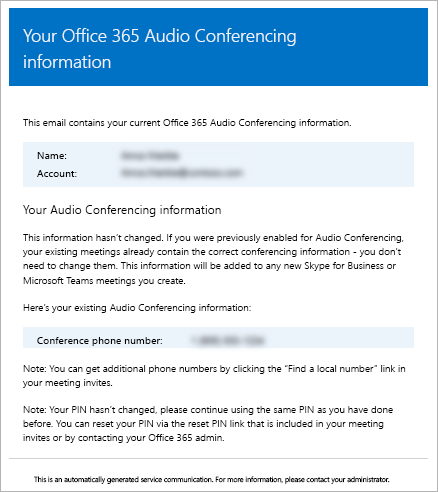
<style>
.page{position:relative;width:438px;height:492px;background:#ffffff}
.page>*{position:absolute;margin:0}
.t1{font:17.7px/26.1px "SegoeUI-Semilight";color:#ebf3fb}
.t2{font:10.1px "SegoeUI-Semilight";color:#000000}
.t3{font:10.4px "SegoeUI";color:#000000}
.t4{font:12.4px "SegoeUI-Semilight";color:#000000}
.t5{font:10.1px/14.3px "SegoeUI-Semilight";color:#000000}
.t6{font:10.1px/14px "SegoeUI-Semilight";color:#000000}
.t7{font:7.2px "SegoeUI-Semilight";color:#000000}
</style>
<div class="page">
<p class="t1" style="left:23px;top:28px;width:273px;height:40px">Your Office 365 Audio Conferencing<br>information</p>
<p class="t2" style="left:23px;top:119px;width:328px;height:9px">This email contains your current Office 365 Audio Conferencing information.</p>
<p class="t3" style="left:37px;top:152px;width:30px;height:7px">Name:</p>
<p class="t3" style="left:37px;top:170px;width:40px;height:7px">Account:</p>
<p class="t4" style="left:23px;top:205px;width:198px;height:12px">Your Audio Conferencing information</p>
<p class="t5" style="left:23px;top:234px;width:381px;height:52px">This information hasn’t changed. If you were previously enabled for Audio Conferencing,<br>your existing meetings already contain the correct conferencing information - you don’t<br>need to change them. This information will be added to any new Skype for Business or<br>Microsoft Teams meetings you create.</p>
<p class="t2" style="left:23px;top:304px;width:228px;height:9px">Here’s your existing Audio Conferencing information:</p>
<p class="t3" style="left:37px;top:337px;width:125px;height:9px">Conference phone number:</p>
<p class="t6" style="left:23px;top:365px;width:383px;height:23px">Note: You can get additional phone numbers by clicking the “Find a local number” link in<br>your meeting invites.</p>
<p class="t6" style="left:23px;top:406px;width:370px;height:37px">Note: Your PIN hasn’t changed, please continue using the same PIN as you have done<br>before. You can reset your PIN via the reset PIN link that is included in your meeting<br>invites or by contacting your Office 365 admin.</p>
<p class="t7" style="left:34px;top:476px;width:356px;height:8px">This is an automatically generated service communication. For more information, please contact your administrator.</p>
</div>
